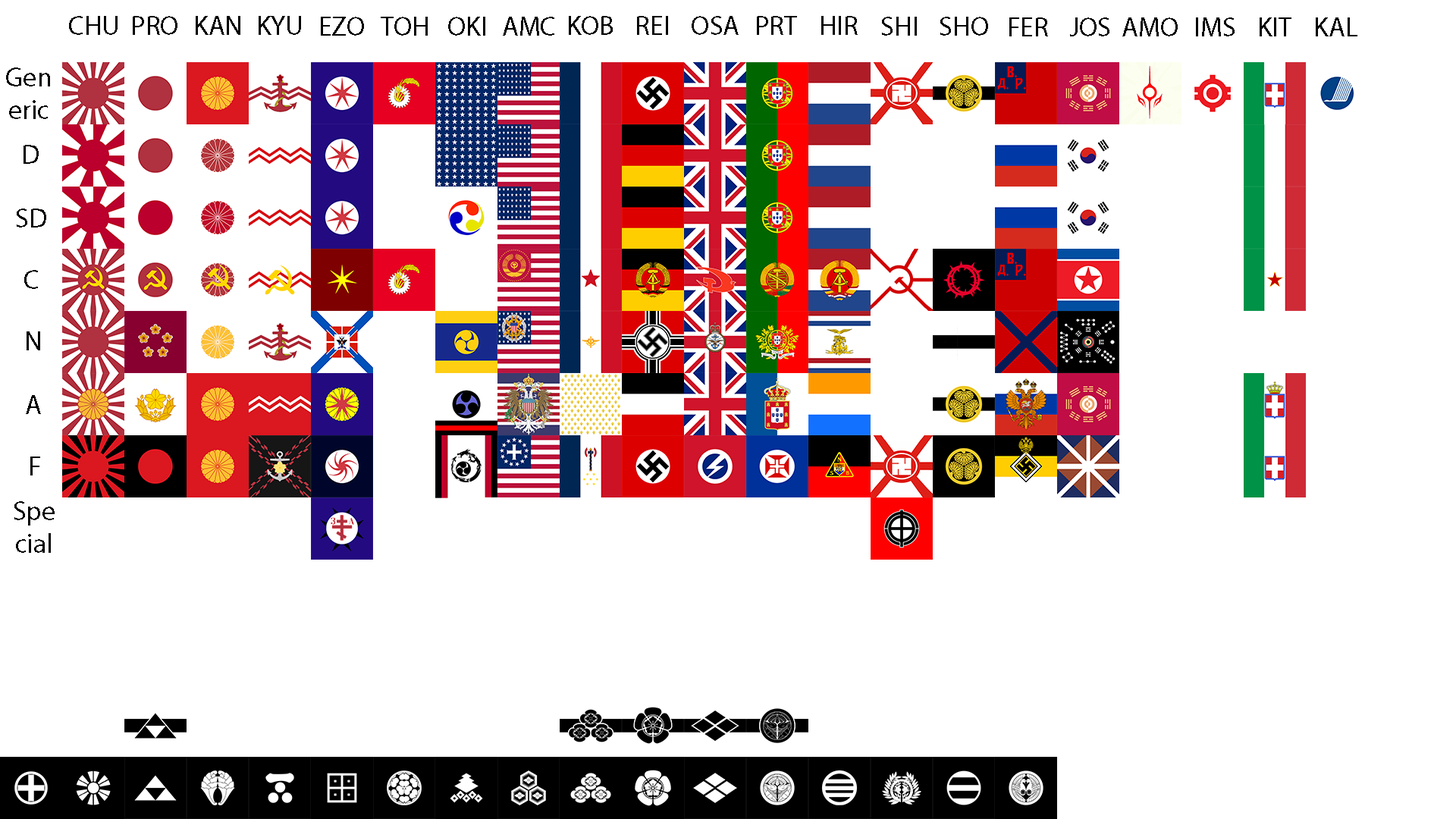
<style>
.page{position:relative;width:1456px;height:819px;background:#ffffff}
.page>*{position:absolute;margin:0}
.t1{font:27.3px "MyriadPro-Regular";color:#000000}
</style>
<div class="page">
<p class="t1" style="left:69px;top:16px;width:49px;height:19px">CHU</p>
<p class="t1" style="left:133px;top:16px;width:44px;height:19px">PRO</p>
<p class="t1" style="left:196px;top:16px;width:44px;height:19px">KAN</p>
<p class="t1" style="left:259px;top:16px;width:42px;height:19px">KYU</p>
<p class="t1" style="left:321px;top:17px;width:43px;height:19px">EZO</p>
<p class="t1" style="left:381px;top:17px;width:47px;height:19px">TOH</p>
<p class="t1" style="left:448px;top:17px;width:37px;height:19px">OKI</p>
<p class="t1" style="left:503px;top:17px;width:51px;height:19px">AMC</p>
<p class="t1" style="left:569px;top:16px;width:44px;height:19px">KOB</p>
<p class="t1" style="left:637px;top:16px;width:31px;height:19px">REI</p>
<p class="t1" style="left:692px;top:16px;width:47px;height:19px">OSA</p>
<p class="t1" style="left:757px;top:16px;width:40px;height:19px">PRT</p>
<p class="t1" style="left:821px;top:16px;width:37px;height:19px">HIR</p>
<p class="t1" style="left:882px;top:17px;width:35px;height:19px">SHI</p>
<p class="t1" style="left:940px;top:17px;width:48px;height:19px">SHO</p>
<p class="t1" style="left:1009px;top:17px;width:39px;height:19px">FER</p>
<p class="t1" style="left:1070px;top:17px;width:39px;height:19px">JOS</p>
<p class="t1" style="left:1122px;top:17px;width:56px;height:19px">AMO</p>
<p class="t1" style="left:1196px;top:17px;width:39px;height:19px">IMS</p>
<p class="t1" style="left:1260px;top:17px;width:31px;height:19px">KIT</p>
<p class="t1" style="left:1316px;top:17px;width:41px;height:19px">KAL</p>
<p class="t1" style="left:6px;top:67px;width:44px;height:52px;text-align:center">Gen<br>eric</p>
<p class="t1" style="left:24px;top:145px;width:15px;height:19px">D</p>
<p class="t1" style="left:17px;top:209px;width:29px;height:18px">SD</p>
<p class="t1" style="left:24px;top:270px;width:14px;height:19px">C</p>
<p class="t1" style="left:27px;top:331px;width:13px;height:19px">N</p>
<p class="t1" style="left:26px;top:395px;width:15px;height:19px">A</p>
<p class="t1" style="left:30px;top:457px;width:10px;height:18px">F</p>
<p class="t1" style="left:14px;top:501px;width:41px;height:52px;text-align:center">Spe<br>cial</p>
</div>
